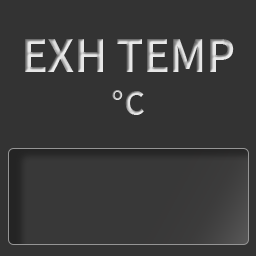
<style>
.page{position:relative;width:256px;height:256px;background:#333333}
.page>*{position:absolute;margin:0}
.t1{font:50px "SourceSansPro-SemiBold";letter-spacing:-0.01em}
.t2{font:36px "SourceSansPro-SemiBold";letter-spacing:-0.01em}
</style>
<div class="page">
<p class="t1" style="left:25px;top:39px;width:209px;height:76px;text-align:center">EXH TEMP<br><span class="t2">°C</span></p>
</div>
